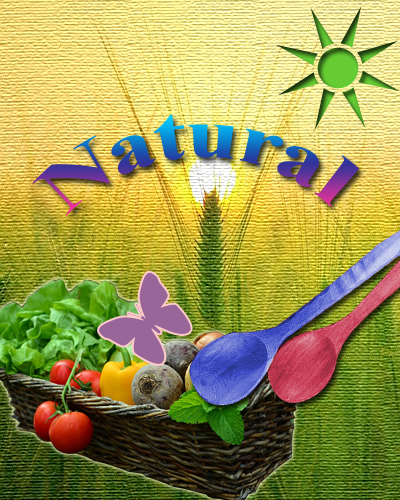
<style>
.page{position:relative;width:400px;height:500px}
.page>*{position:absolute;margin:0}
.t1{font:70px "TimesNewRomanPS-BoldMT"}
</style>
<div class="page">
<p class="t1" style="left:32px;top:114px;width:328px;height:102px;rotate:-2deg">Natural</p>
</div>
